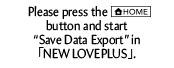
<style>
.page{position:relative;width:174px;height:68px;background:#ffffff}
.page>*{position:absolute;margin:0}
.t1{font:13.2px "Amira-Roman";color:#000000;scale:0.91 1}
.t2{font:13.2px "KozGoPr6N-Regular";color:#000000;scale:0.91 1}
</style>
<div class="page">
<p class="t1" style="left:28px;top:6px;width:80px;height:13px">Please press the</p>
<p class="t1" style="left:33px;top:20px;width:107px;height:39px;text-align:center">button and start <br>“Save Data Export” in <br><span class="t2">「</span>NEW LOVEPLUS<span class="t2">」</span>.</p>
</div>
